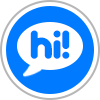
<style>
.page{position:relative;width:100px;height:100px;background:#ffffff}
.page>*{position:absolute;margin:0}
.t1{font:41.7px "PicoBlack";letter-spacing:-0.01em;color:#007aff}
</style>
<div class="page">
<p class="t1" style="left:30px;top:30px;width:40px;height:29px">hi!</p>
</div>
